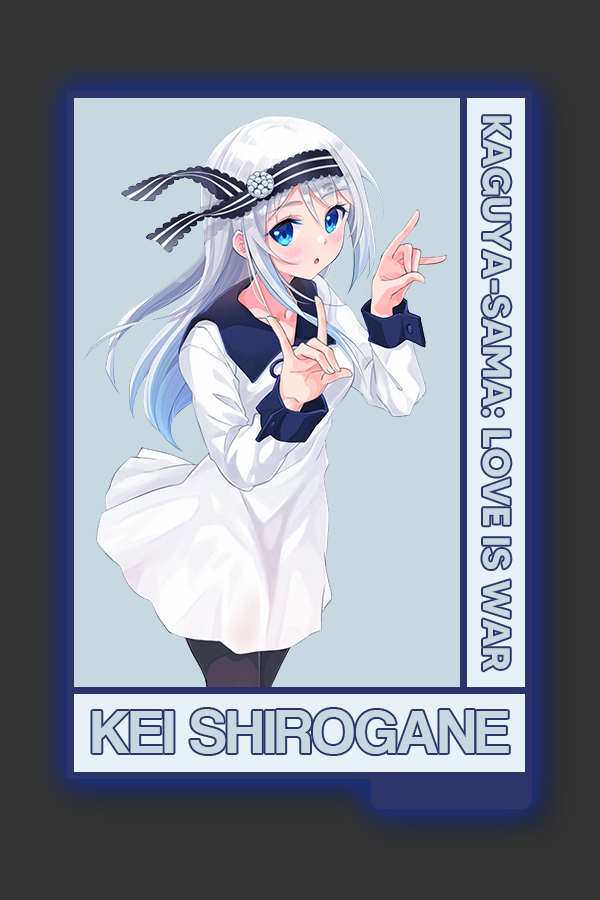
<style>
.page{position:relative;width:600px;height:900px;background:#333333}
.page>*{position:absolute;margin:0}
.t1{font:38.3px "MADETOMMY-Bold";color:#d5dde0}
.t2{font:63.6px "CoolveticaRg-Regular";color:#d5dde0}
</style>
<div class="page">
<p class="t1" style="left:482px;top:116px;width:29px;height:555px;rotate:90deg">KAGUYA-SAMA: LOVE IS WAR</p>
<p class="t2" style="left:92px;top:709px;width:417px;height:45px">KEI SHIROGANE</p>
</div>
